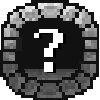
<style>
.page{position:relative;width:100px;height:100px;background:#111111}
.page>*{position:absolute;margin:0}
.t1{font:76.8px "Final-Fantasy-3/6-Font";color:#ffffff}
.t2{font:76.8px "Final-Fantasy-3/6-Font"}
</style>
<div class="page">
<p class="t1" style="left:34px;top:29px;width:29px;height:43px">?</p>
<p class="t2" style="left:37px;top:30px;width:29px;height:43px">?</p>
</div>
